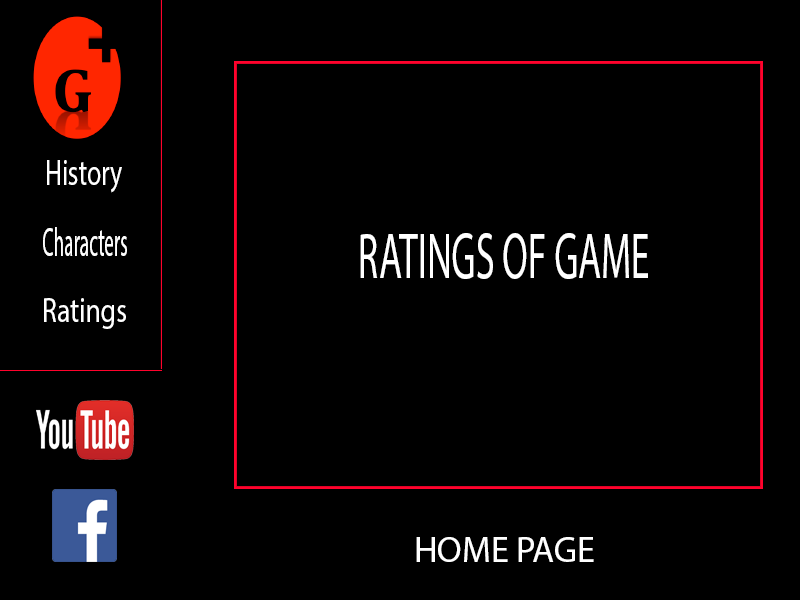
<style>
.page{position:relative;width:800px;height:600px;background:#000000}
.page>*{position:absolute;margin:0}
.t1{font:35.8px "MyriadPro-Regular";color:#ffffff;scale:0.72 1}
.t2{font:40.8px "MyriadPro-Regular";color:#ffffff;scale:0.48 1}
.t3{font:64.6px "MyriadPro-Regular";color:#ffffff;scale:0.58 1}
.t4{font:35px "MyriadPro-Regular";color:#ffffff;scale:0.78 1}
.t5{font:36px "MyriadPro-Regular";color:#ffffff}
</style>
<div class="page">
<p class="t1" style="left:47px;top:160px;width:75px;height:33px">History</p>
<p class="t2" style="left:43px;top:227px;width:84px;height:29px">Characters</p>
<p class="t3" style="left:360px;top:233px;width:288px;height:46px">RATINGS OF GAME</p>
<p class="t4" style="left:44px;top:298px;width:82px;height:31px">Ratings</p>
<p class="t5" style="left:416px;top:537px;width:178px;height:25px">HOME PAGE</p>
</div>
